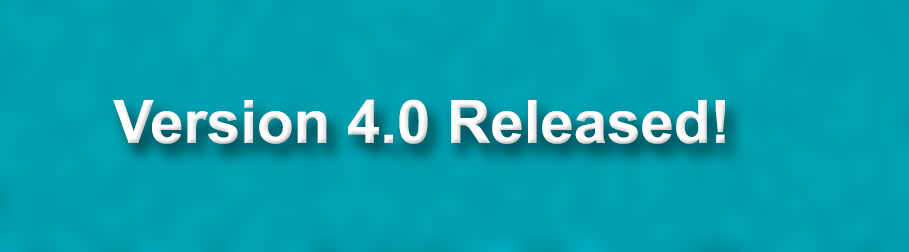
<style>
.page{position:relative;width:909px;height:252px}
.page>*{position:absolute;margin:0}
.t1{font:60px "Arial-BoldMT";color:#ffffff}
</style>
<div class="page">
<p class="t1" style="left:113px;top:99px;width:612px;height:45px">Version 4.0 Released!</p>
</div>
